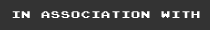
<style>
.page{position:relative;width:210px;height:30px;background:#333333}
.page>*{position:absolute;margin:0}
.t1{font:7.8px "PressStartReg";letter-spacing:0.125em;color:#ffffff;scale:1.14 1}
</style>
<div class="page">
<p class="t1" style="left:12px;top:11px;width:188px;height:7px">IN ASSOCIATION WITH</p>
</div>
